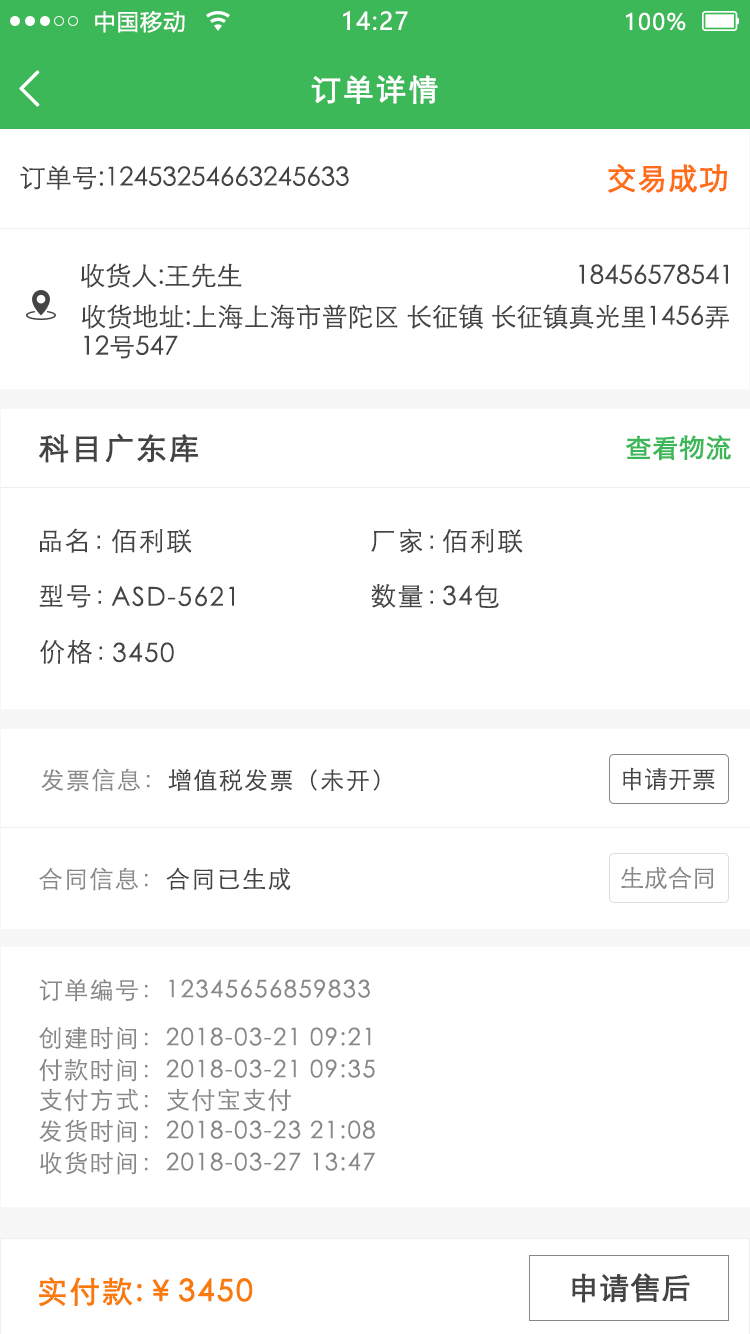
<style>
.page{position:relative;width:750px;height:1334px;background:#ffffff}
.page>*{position:absolute;margin:0}
.t1{font:22px "MicrosoftYaHei";letter-spacing:0.06em;color:#ffffff}
.t2{font:24px "MicrosoftYaHei";letter-spacing:0.06em;color:#ffffff}
.t3{font:49.8px "NSimSun";letter-spacing:0.06em;color:#fefffe;font-weight:bold}
.t4{font:30px "STXihei";letter-spacing:0.06em;color:#fefffe;font-weight:bold}
.t5{font:26px "STXihei";color:#444444}
.t6{font:30px "STXihei";color:#ff6e17;font-weight:bold}
.t7{font:26px/30px "STXihei";color:#444444}
.t8{font:30px "STXihei";letter-spacing:0.06em;color:#444444;font-weight:bold}
.t9{font:26px "STXihei";color:#3db858;font-weight:bold}
.t10{font:26px "STXihei";letter-spacing:0.06em;color:#444444}
.t11{font:24px "STXihei";letter-spacing:0.06em;color:#444444}
.t12{font:24px "STXihei";letter-spacing:0.06em;color:#888888}
.t13{font:24px "STXihei";color:#444444}
.t14{font:24px "STXihei";color:#888888}
.t15{font:30px "STXihei";letter-spacing:0.06em;color:#f97a08;font-weight:bold}
.t16{font:30px "STXihei";color:#444444;font-weight:bold}
</style>
<div class="page">
<p class="t1" style="left:95px;top:10px;width:90px;height:23px">中国移动</p>
<p class="t2" style="left:343px;top:11px;width:65px;height:20px">14:27</p>
<p class="t1" style="left:626px;top:12px;width:60px;height:19px">100%</p>
<p class="t3" style="left:19px;top:70px;width:21px;height:37px">&lt;</p>
<p class="t4" style="left:311px;top:75px;width:127px;height:29px">订单详情</p>
<p class="t5" style="left:20px;top:165px;width:329px;height:25px">订单号:12453254663245633</p>
<p class="t6" style="left:608px;top:163px;width:119px;height:30px">交易成功</p>
<p class="t5" style="left:80px;top:263px;width:162px;height:25px">收货人:王先生</p>
<p class="t5" style="left:579px;top:264px;width:149px;height:20px">18456578541</p>
<p class="t7" style="left:81px;top:304px;width:648px;height:55px">收货地址:上海上海市普陀区 长征镇 长征镇真光里1456弄<br>12号547</p>
<p class="t8" style="left:39px;top:433px;width:159px;height:30px">科目广东库</p>
<p class="t9" style="left:626px;top:434px;width:105px;height:27px">查看物流</p>
<p class="t10" style="left:40px;top:528px;width:60px;height:25px">品名：</p>
<p class="t10" style="left:111px;top:529px;width:81px;height:24px">佰利联</p>
<p class="t10" style="left:371px;top:528px;width:62px;height:25px">厂家：</p>
<p class="t10" style="left:442px;top:529px;width:81px;height:24px">佰利联</p>
<p class="t10" style="left:39px;top:584px;width:62px;height:24px">型号：</p>
<p class="t10" style="left:111px;top:586px;width:123px;height:21px">ASD-5621</p>
<p class="t10" style="left:371px;top:584px;width:62px;height:24px">数量：</p>
<p class="t10" style="left:443px;top:585px;width:56px;height:23px">34包</p>
<p class="t10" style="left:40px;top:639px;width:62px;height:25px">价格：</p>
<p class="t10" style="left:113px;top:642px;width:61px;height:21px">3450</p>
<p class="t11" style="left:41px;top:768px;width:339px;height:24px"><span class="t12">发票信息：</span>增值税发票（未开）</p>
<p class="t13" style="left:623px;top:767px;width:92px;height:24px">申请开票</p>
<p class="t12" style="left:39px;top:867px;width:252px;height:24px">合同信息：<span class="t11">合同已生成</span></p>
<p class="t14" style="left:621px;top:866px;width:93px;height:23px">生成合同</p>
<p class="t12" style="left:39px;top:979px;width:331px;height:23px">订单编号：12345656859833</p>
<p class="t12" style="left:39px;top:1026px;width:332px;height:24px">创建时间：2018-03-21 09:21</p>
<p class="t12" style="left:39px;top:1058px;width:336px;height:24px">付款时间：2018-03-21 09:35</p>
<p class="t12" style="left:39px;top:1088px;width:252px;height:24px">支付方式：支付宝支付</p>
<p class="t12" style="left:39px;top:1119px;width:336px;height:24px">发货时间：2018-03-23 21:08</p>
<p class="t12" style="left:40px;top:1151px;width:335px;height:24px">收货时间：2018-03-27 13:47</p>
<p class="t15" style="left:39px;top:1277px;width:214px;height:30px">实付款:￥3450</p>
<p class="t16" style="left:572px;top:1273px;width:118px;height:30px">申请售后</p>
</div>
